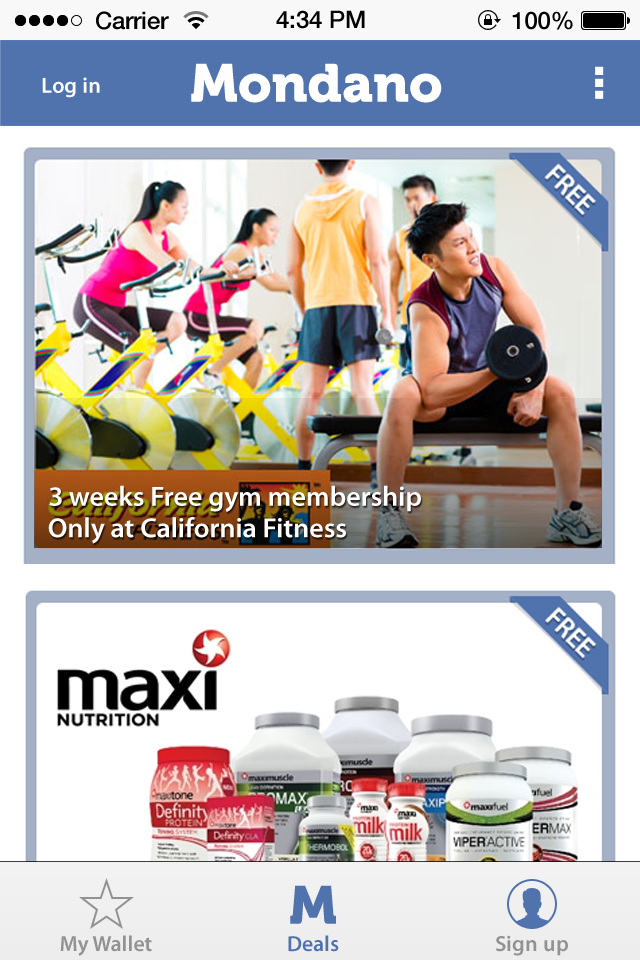
<style>
.page{position:relative;width:640px;height:960px;background:#ffffff}
.page>*{position:absolute;margin:0}
.t1{font:24px "HelveticaNeue-Medium";color:#000000}
.t2{font:53.3px "Museo900-Regular";color:#ffffff}
.t3{font:22px "MyriadPro-Semibold";color:#ffffff}
.t4{font:28px "MyriadPro-Semibold";color:#ffffff}
.t5{font:53.3px "Museo900-Regular";color:#5173ad}
.t6{font:22px "MyriadPro-Semibold";color:#929292}
.t7{font:22px "MyriadPro-Semibold";color:#5173ad}
</style>
<div class="page">
<p class="t1" style="left:96px;top:11px;width:73px;height:19px">Carrier</p>
<p class="t1" style="left:276px;top:10px;width:89px;height:19px">4:34 PM</p>
<p class="t1" style="left:512px;top:11px;width:61px;height:19px">100%</p>
<p class="t2" style="left:191px;top:63px;width:251px;height:40px">Mondano</p>
<p class="t3" style="left:42px;top:77px;width:58px;height:21px">Log in</p>
<p class="t4" style="left:49px;top:485px;width:372px;height:27px">3 weeks Free gym membership</p>
<p class="t4" style="left:48px;top:517px;width:298px;height:27px">Only at California Fitness</p>
<p class="t5" style="left:290px;top:885px;width:46px;height:39px">M</p>
<p class="t5" style="left:290px;top:885px;width:46px;height:39px">M</p>
<p class="t6" style="left:60px;top:935px;width:92px;height:21px">My Wallet</p>
<p class="t7" style="left:288px;top:935px;width:51px;height:17px">Deals</p>
<p class="t7" style="left:288px;top:935px;width:51px;height:17px">Deals</p>
<p class="t6" style="left:496px;top:935px;width:72px;height:21px">Sign up</p>
</div>
